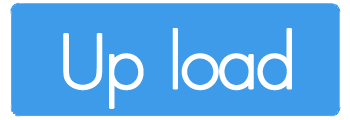
<style>
.page{position:relative;width:350px;height:120px;background:#3d9be9}
.page>*{position:absolute;margin:0}
.t1{font:72px "FuturaLight";letter-spacing:-0.055em;color:#ffffff;font-weight:bold}
</style>
<div class="page">
<p class="t1" style="left:63px;top:28px;width:229px;height:81px">Up  load</p>
</div>
